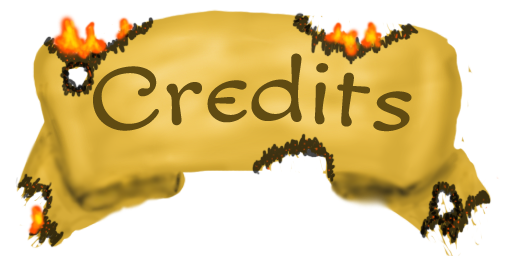
<style>
.page{position:relative;width:512px;height:256px;background:#ffffff}
.page>*{position:absolute;margin:0}
.t1{font:90px "MacondoSwashCaps-Regular";color:#604b12}
</style>
<div class="page">
<p class="t1" style="left:93px;top:53px;width:319px;height:79px">Credits</p>
</div>
